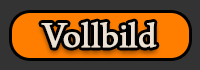
<style>
.page{position:relative;width:200px;height:70px;background:#333333}
.page>*{position:absolute;margin:0}
.t1{font:37.5px "ArnoPro-Regular";letter-spacing:-0.018em;color:#ece1d2;font-weight:bold}
</style>
<div class="page">
<p class="t1" style="left:41px;top:21px;width:116px;height:27px">Vollbild</p>
</div>
